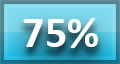
<style>
.page{position:relative;width:120px;height:64px}
.page>*{position:absolute;margin:0}
.t1{font:44.4px "Calibri-Bold";color:#ffffff}
</style>
<div class="page">
<p class="t1" style="left:23px;top:18px;width:75px;height:30px">75%</p>
</div>
